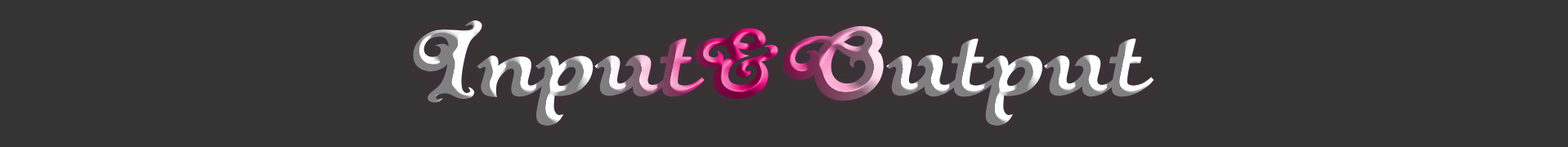
<style>
.page{position:relative;width:1568px;height:147px;background:#333333}
.page>*{position:absolute;margin:0}
.t1{font:108.8px "BlackRose";scale:1.2 1}
</style>
<div class="page">
<p class="t1" style="left:413px;top:20px;width:741px;height:107px">Input&amp;Output</p>
</div>
